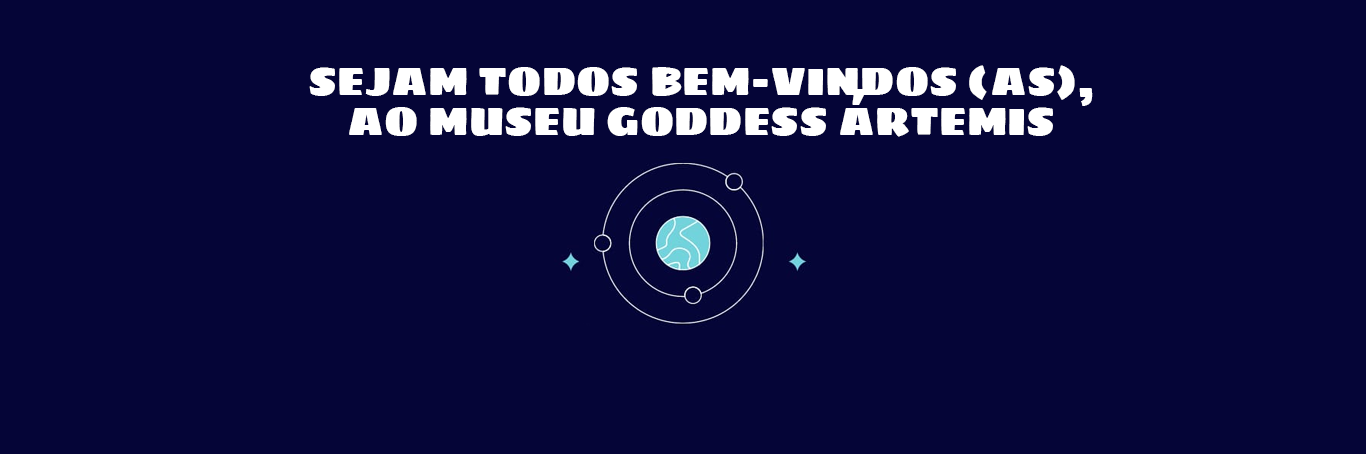
<style>
.page{position:relative;width:1366px;height:454px;background:#050537}
.page>*{position:absolute;margin:0}
.t1{font:40px/20px "SigmarOne-Regular";color:#ffffff;text-transform:uppercase}
</style>
<div class="page">
<p class="t1" style="left:309px;top:65px;width:784px;height:72px;text-align:center">SEJAM TODOS BEM-VINDOS (AS),<br><br>AO MUSEU GODDESS ÁRTEMIS</p>
</div>
